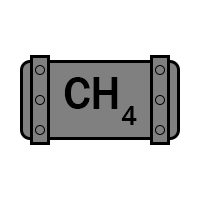
<style>
.page{position:relative;width:200px;height:200px;background:#ffffff}
.page>*{position:absolute;margin:0}
.t1{font:48px "FranklinGothic-Medium";color:#000000}
</style>
<div class="page">
<p class="t1" style="left:64px;top:77px;width:73px;height:48px">CH4</p>
</div>
